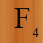
<style>
.page{position:relative;width:43px;height:43px}
.page>*{position:absolute;margin:0}
.t1{font:30px "TimesNewRomanPSMT";color:#0c0c0b}
.t2{font:12px "TimesNewRomanPSMT";color:#0c0c0b}
</style>
<div class="page">
<p class="t1" style="left:14px;top:8px;width:16px;height:20px">F</p>
<p class="t2" style="left:32px;top:28px;width:7px;height:9px">4</p>
</div>
